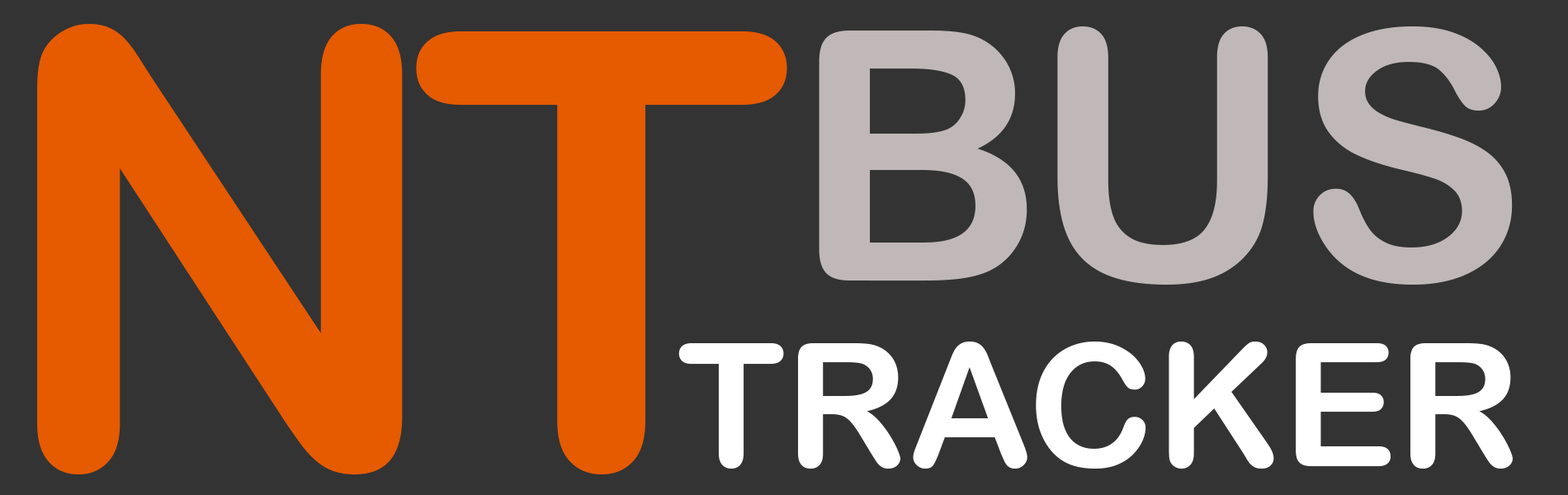
<style>
.page{position:relative;width:1568px;height:495px;background:#333333}
.page>*{position:absolute;margin:0}
.t1{font:608.6px "ArialRoundedMTBold";color:#e65a00}
.t2{font:348.9px "ArialRoundedMTBold";color:#c0b8b8}
.t3{font:172px "ArialRoundedMTBold";color:#ffffff}
</style>
<div class="page">
<p class="t1" style="left:37px;top:24px;width:366px;height:451px">N</p>
<p class="t2" style="left:819px;top:26px;width:694px;height:259px">BUS</p>
<p class="t1" style="left:416px;top:31px;width:371px;height:444px">T</p>
<p class="t3" style="left:678px;top:342px;width:835px;height:127px">TRACKER</p>
</div>
